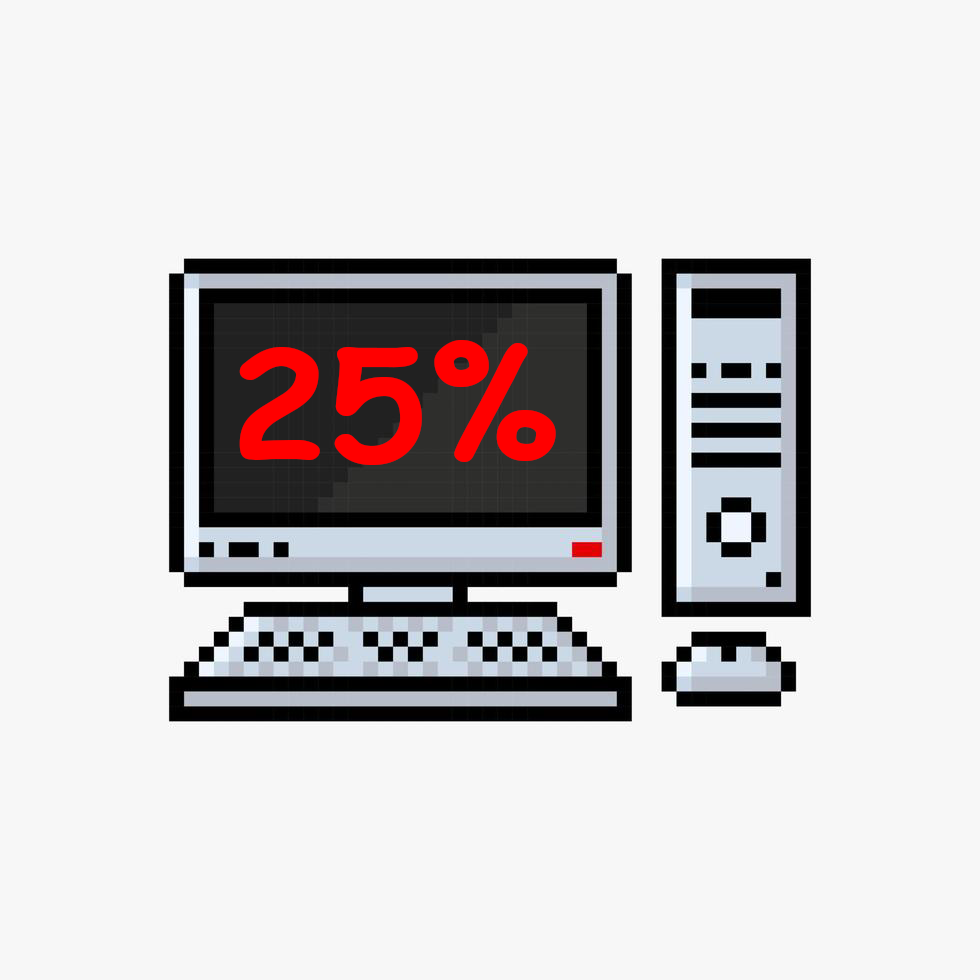
<style>
.page{position:relative;width:980px;height:980px;background:#f7f7f7}
.page>*{position:absolute;margin:0}
.t1{font:150px "ComicSansMS-Bold";color:#ff0000;scale:1.07 1}
</style>
<div class="page">
<p class="t1" style="left:239px;top:340px;width:317px;height:125px">25%</p>
</div>
